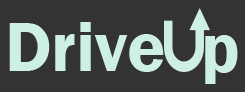
<style>
.page{position:relative;width:245px;height:92px;background:#333333}
.page>*{position:absolute;margin:0}
.t1{font:72px "FranklinGothic-Demi";color:#ceefe4}
</style>
<div class="page">
<p class="t1" style="left:9px;top:22px;width:155px;height:50px">Drive</p>
<p class="t1" style="left:205px;top:35px;width:33px;height:49px">p</p>
</div>
